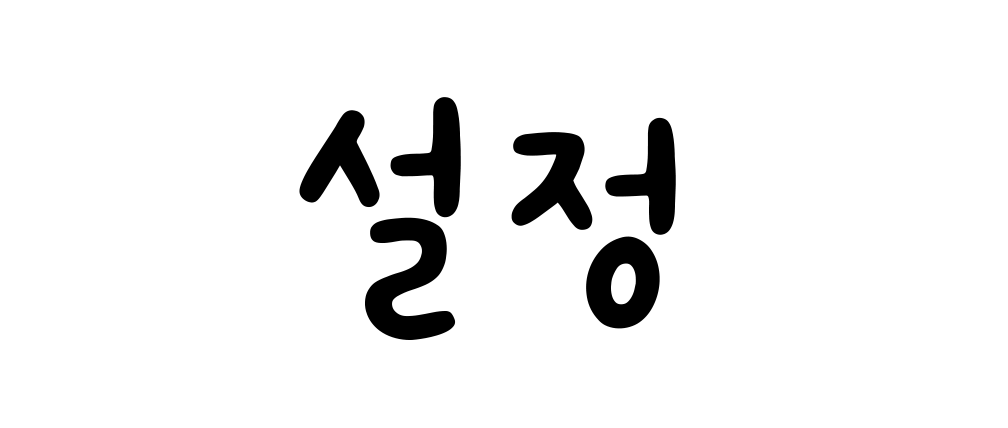
<style>
.page{position:relative;width:1008px;height:428px;background:#ffffff}
.page>*{position:absolute;margin:0}
.t1{font:250px "godoMaum";letter-spacing:0.1em;color:#000000}
</style>
<div class="page">
<p class="t1" style="left:299px;top:97px;width:377px;height:243px">설정</p>
</div>
